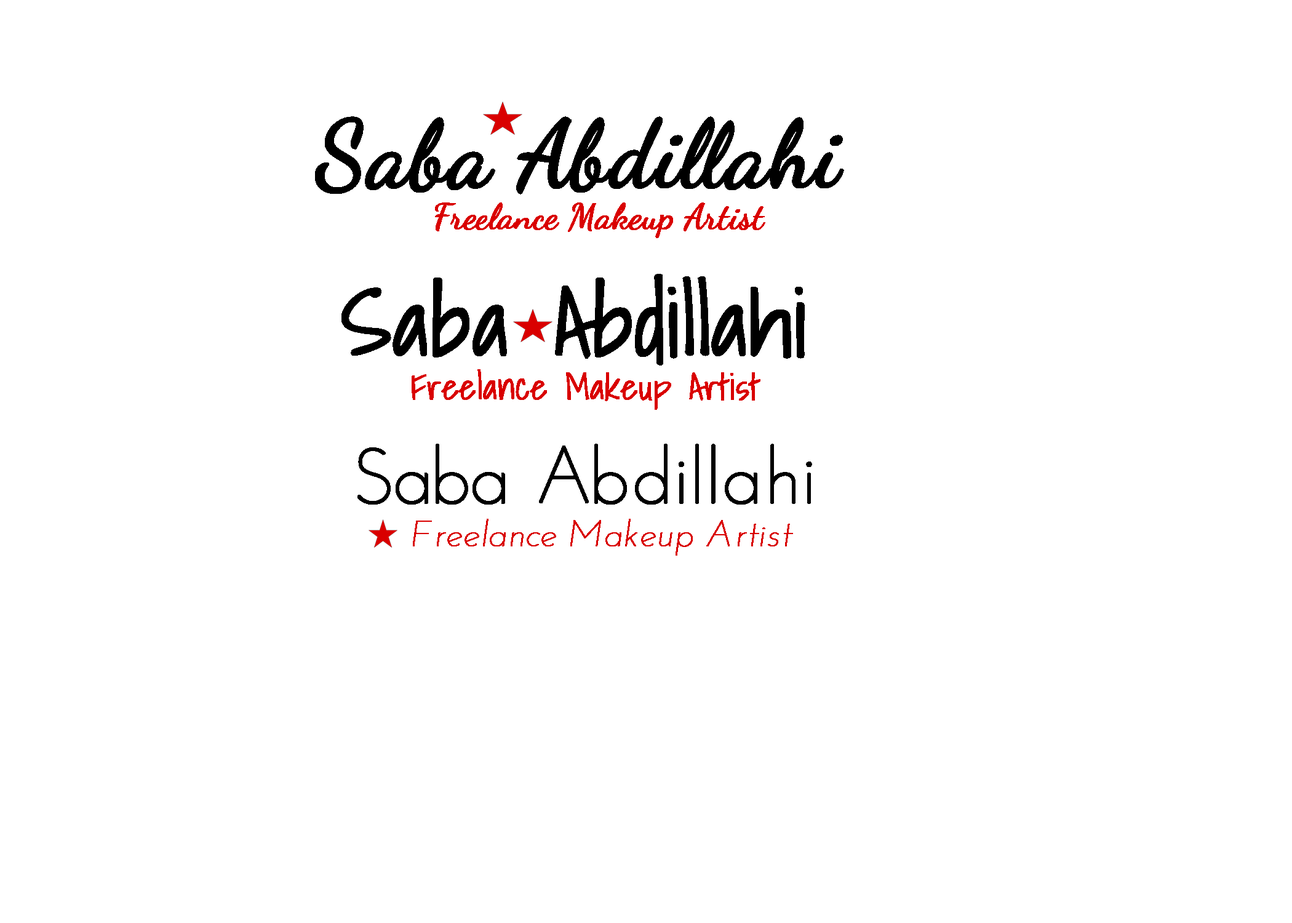
<style>
.page{position:relative;width:1292px;height:923px;background:#ffffff}
.page>*{position:absolute;margin:0}
.t1{font:35.9px "DancingScript";color:#d90000;font-weight:bold}
.t2{font:92.3px "DancingScript";color:#000000;font-weight:bold}
.t3{font:35.9px "ShadowsIntoLight";color:#d90000;font-weight:bold}
.t4{font:92.3px "ShadowsIntoLight";color:#000000;font-weight:bold}
.t5{font:35.9px "JosefinSans-ThinItalic";color:#d90000;font-weight:bold}
.t6{font:76.9px "JosefinSans-Thin";color:#000000;font-weight:bold}
</style>
<div class="page">
<p class="t1" style="left:315px;top:116px;width:529px;height:122px"><span class="t2">Saba Abdillahi<br>            </span>Freelance Makeup Artist</p>
<p class="t3" style="left:341px;top:274px;width:464px;height:136px"><span class="t4">Saba Abdillahi<br>   </span> Freelance Makeup Artist</p>
<p class="t5" style="left:357px;top:444px;width:455px;height:112px"><span class="t6">Saba Abdillahi<br></span>     Freelance Makeup Artist</p>
</div>
